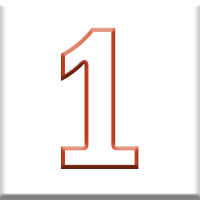
<style>
.page{position:relative;width:200px;height:200px;background:#ffffff}
.page>*{position:absolute;margin:0}
.t1{font:210px "FranklinGothic-DemiCond";color:#ffffff}
</style>
<div class="page">
<p class="t1" style="left:61px;top:27px;width:78px;height:142px">1</p>
</div>
